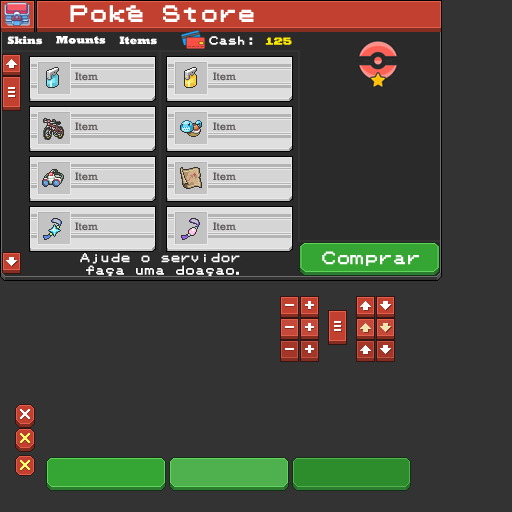
<style>
.page{position:relative;width:512px;height:512px;background:#333333}
.page>*{position:absolute;margin:0}
.t1{font:11px "Rockwell-ExtraBold";color:#ffffff}
.t2{font:9px "PokemonGB";color:#ffffff;font-weight:bold}
.t3{font:9px "PokemonGB";color:#fde800;font-weight:bold}
.t4{font:11px "Rockwell";color:#5d5959}
.t5{font:10px "PokemonGB";color:#ffffff}
.t6{font:14px "PokemonGB";color:#ffffff}
</style>
<div class="page">
<p class="t1" style="left:7px;top:36px;width:36px;height:9px">Skins</p>
<p class="t1" style="left:56px;top:36px;width:50px;height:8px">Mounts</p>
<p class="t1" style="left:119px;top:36px;width:38px;height:9px">Items</p>
<p class="t2" style="left:209px;top:36px;width:83px;height:9px">Cash:<span class="t3"> 125</span></p>
<p class="t4" style="left:75px;top:72px;width:23px;height:9px">Item</p>
<p class="t4" style="left:213px;top:72px;width:23px;height:9px">Item</p>
<p class="t4" style="left:75px;top:122px;width:23px;height:9px">Item</p>
<p class="t4" style="left:213px;top:122px;width:23px;height:9px">Item</p>
<p class="t4" style="left:75px;top:172px;width:23px;height:9px">Item</p>
<p class="t4" style="left:213px;top:172px;width:23px;height:9px">Item</p>
<p class="t4" style="left:75px;top:222px;width:23px;height:9px">Item</p>
<p class="t4" style="left:213px;top:222px;width:23px;height:9px">Item</p>
<p class="t5" style="left:80px;top:253px;width:160px;height:11px">Ajude o servidor</p>
<p class="t6" style="left:322px;top:251px;width:97px;height:15px">Comprar</p>
<p class="t5" style="left:86px;top:265px;width:153px;height:11px">faça uma doaçao.</p>
</div>
